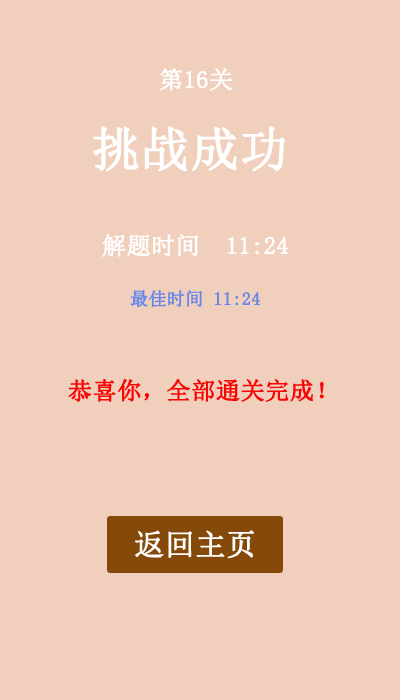
<style>
.page{position:relative;width:400px;height:700px;background:#f0d0bc}
.page>*{position:absolute;margin:0}
.t1{font:24px "SimSun";color:#ffffff;font-weight:bold}
.t2{font:48px "SimSun";color:#ffffff;font-weight:bold}
.t3{font:18px "SimSun";color:#6786ea;font-weight:bold}
.t4{font:24px "SimSun";color:#fa0505;font-weight:bold}
</style>
<div class="page">
<p class="t1" style="left:159px;top:68px;width:74px;height:23px">第16关</p>
<p class="t2" style="left:93px;top:126px;width:193px;height:46px">挑战成功</p>
<p class="t1" style="left:102px;top:234px;width:186px;height:23px">解题时间  11:24</p>
<p class="t3" style="left:130px;top:290px;width:130px;height:18px">最佳时间 11:24</p>
<p class="t4" style="left:68px;top:378px;width:256px;height:24px">恭喜你，全部通关完成！</p>
</div>
